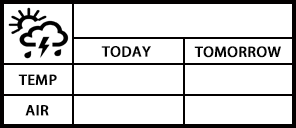
<style>
.page{position:relative;width:296px;height:128px;background:#ffffff}
.page>*{position:absolute;margin:0}
.t1{font:13.3px "AdobeHeitiStd-Regular";color:#040404;font-weight:bold;scale:1.09 1}
</style>
<div class="page">
<p class="t1" style="left:101px;top:46px;width:50px;height:11px">TODAY</p>
<p class="t1" style="left:194px;top:46px;width:87px;height:12px">TOMORROW</p>
<p class="t1" style="left:18px;top:74px;width:39px;height:11px">TEMP</p>
<p class="t1" style="left:25px;top:105px;width:24px;height:11px">AIR</p>
</div>
